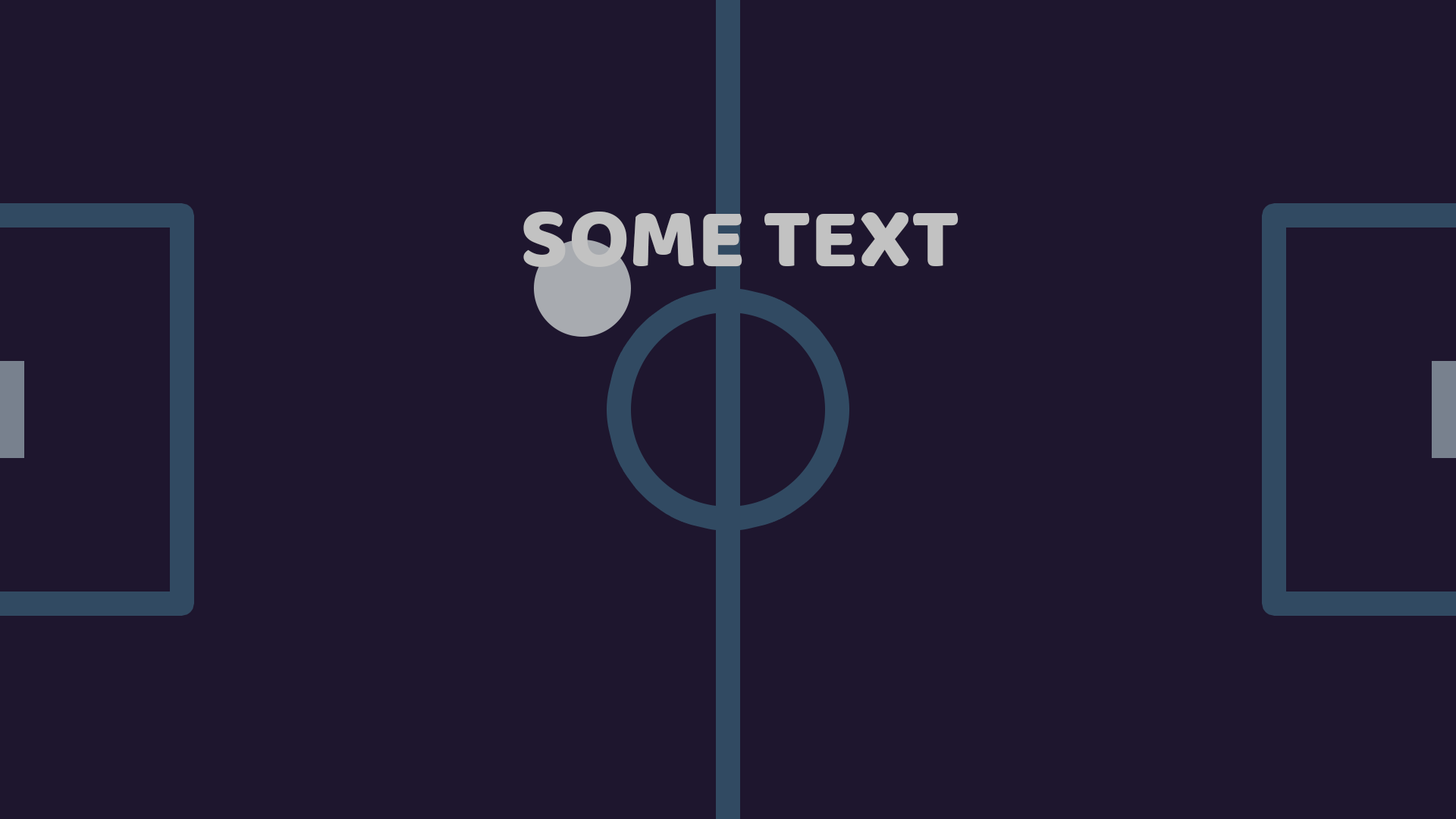
<style>
.page{position:relative;width:1456px;height:819px;background:#1e162e}
.page>*{position:absolute;margin:0}
.t1{font:86.4px "Baloo-Regular";color:#c2c2c2}
</style>
<div class="page">
<p class="t1" style="left:523px;top:212px;width:436px;height:55px">SOME TEXT</p>
</div>
